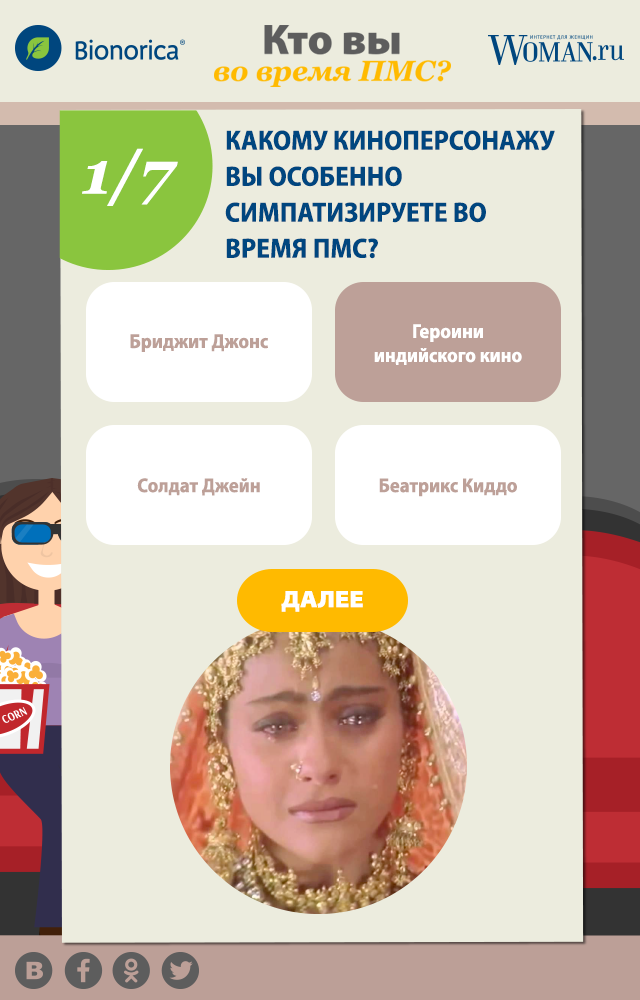
<style>
.page{position:relative;width:640px;height:1000px;background:#ececde}
.page>*{position:absolute;margin:0}
.t1{font:28px/36px "MyriadPro-BoldSemiCn";color:#00467f;text-transform:uppercase}
.t2{font:60px "Georgia-BoldItalic";color:#ffffff}
.t3{font:20px "MyriadPro-BoldSemiCn";color:#ffffff}
.t4{font:20px "MyriadPro-BoldSemiCn";color:#bda098}
.t5{font:24px "MyriadPro-BlackSemiExt";color:#ffffff;text-transform:uppercase}
</style>
<div class="page">
<p class="t1" style="left:225px;top:130px;width:330px;height:129px">Какому киноперсонажу вы особенно симпатизируете во время ПМС?</p>
<p class="t2" style="left:82px;top:148px;width:96px;height:58px">1/7</p>
<p class="t3" style="left:374px;top:324px;width:148px;height:41px;text-align:center">Героини <br>индийского кино</p>
<p class="t4" style="left:130px;top:334px;width:138px;height:18px">Бриджит Джонс</p>
<p class="t4" style="left:137px;top:478px;width:123px;height:18px">Солдат Джейн</p>
<p class="t4" style="left:379px;top:478px;width:138px;height:19px">Беатрикс Киддо</p>
<p class="t5" style="left:281px;top:591px;width:82px;height:21px">далее</p>
</div>
